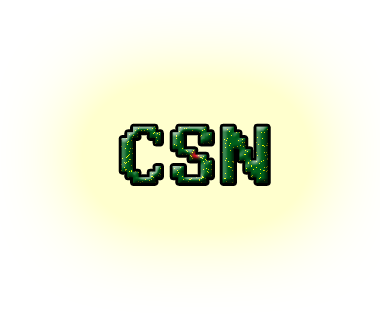
<style>
.page{position:relative;width:380px;height:317px}
.page>*{position:absolute;margin:0}
.t1{font:72px "System"}
</style>
<div class="page">
<p class="t1" style="left:121px;top:126px;width:147px;height:57px">CSN</p>
</div>
